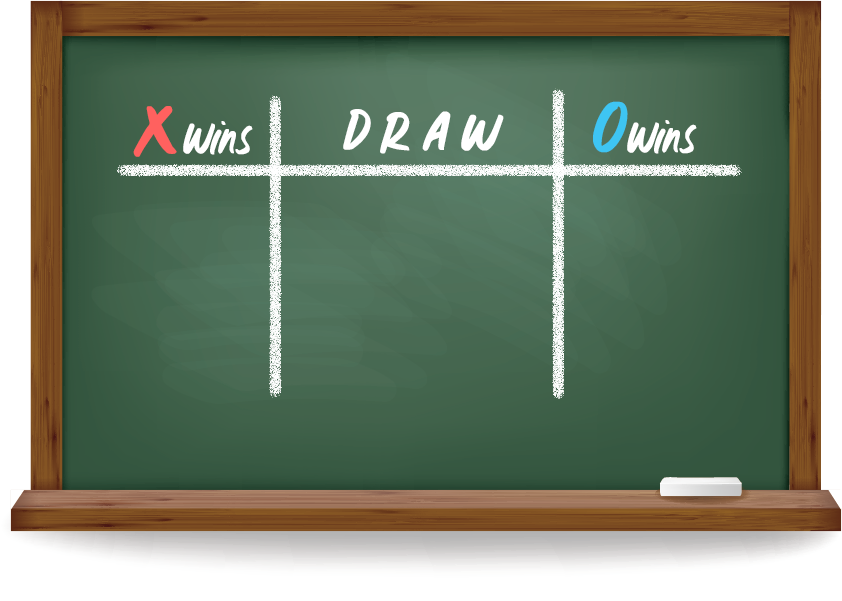
<style>
.page{position:relative;width:842px;height:601px}
.page>*{position:absolute;margin:0}
.t1{font:46px "WillowWispRegular";color:#ffffff;font-weight:bold}
.t2{font:75px "WillowWispRegular";color:#3ec5f3;font-weight:bold}
.t3{font:75px "WillowWispRegular";color:#ff615f;font-weight:bold}
.t4{font:55px "WillowWispRegular";letter-spacing:0.2em;color:#ffffff;font-weight:bold;scale:1.1 1}
</style>
<div class="page">
<p class="t1" style="left:593px;top:101px;width:104px;height:53px"><span class="t2">O</span>Wins</p>
<p class="t1" style="left:133px;top:106px;width:120px;height:51px"><span class="t3">X</span>Wins</p>
<p class="t4" style="left:343px;top:109px;width:161px;height:45px">DRAW</p>
</div>
